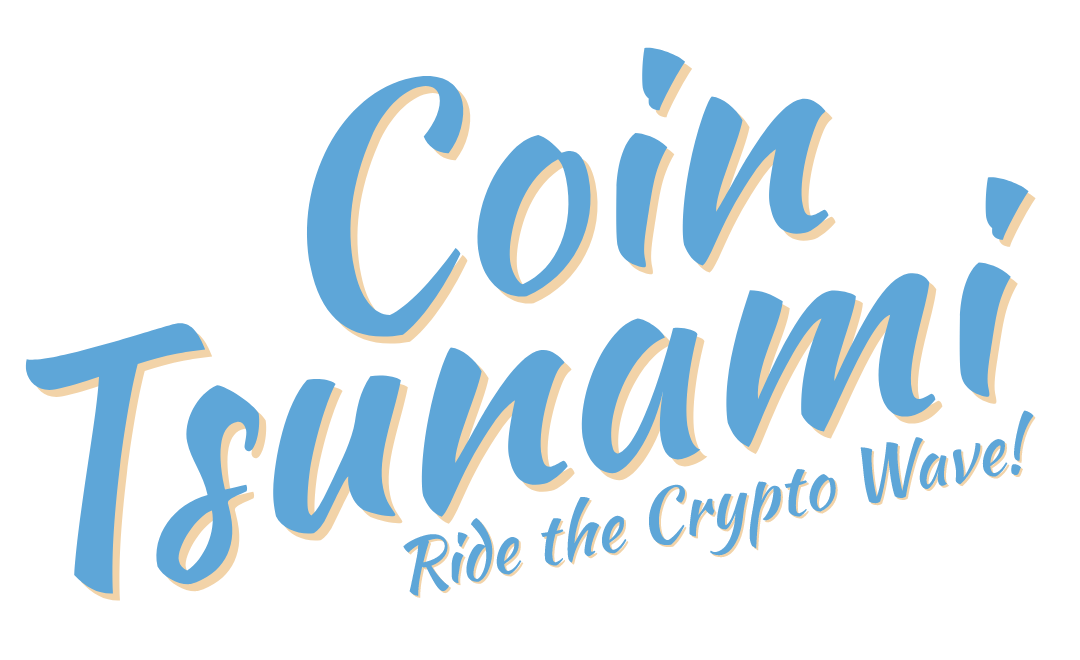
<style>
.page{position:relative;width:1080px;height:660px;background:#ffffff}
.page>*{position:absolute;margin:0}
.t1{font:306.6px "KaushanScript-Regular";color:#5ea6d8}
.t2{font:71px "KaushanScript-Regular";color:#5ea6d8}
</style>
<div class="page">
<p class="t1" style="left:293px;top:46px;width:536px;height:298px;rotate:-11deg">Coin</p>
<p class="t1" style="left:25px;top:175px;width:1004px;height:420px;rotate:-11deg">Tsunami</p>
<p class="t2" style="left:403px;top:410px;width:631px;height:186px;rotate:-11deg">Ride the Crypto Wave!</p>
</div>
